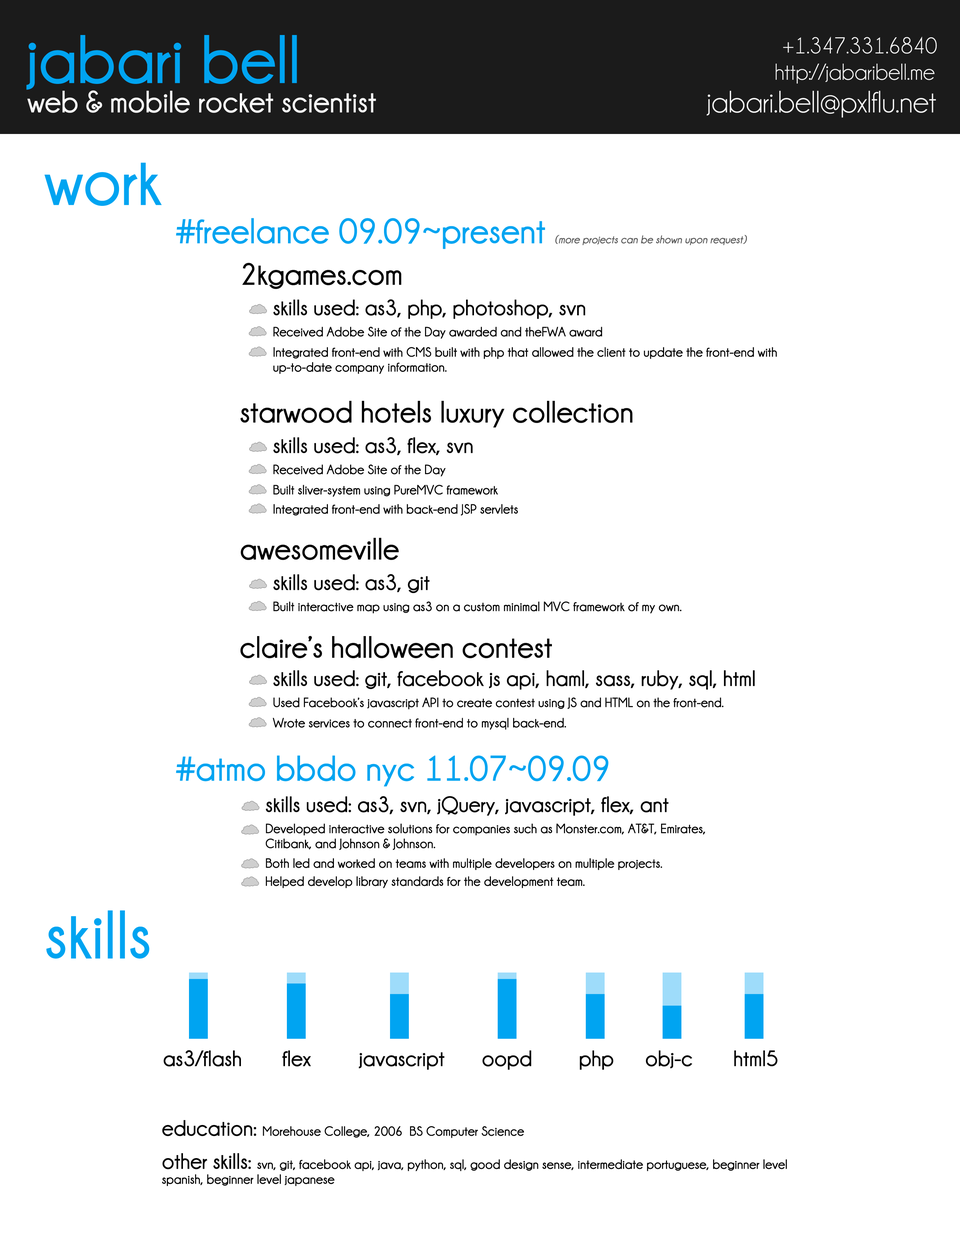
<style>
.page{position:relative;width:960px;height:1242px;background:#ffffff}
.page>*{position:absolute;margin:0}
.t1{font:69.2px "Champagne&Limousines-Bold";color:#00a4f1}
.t2{font:23.3px "Champagne&Limousines";color:#f7f7f7}
.t3{font:31.2px "Champagne&Limousines-Bold";color:#f7f7f7}
.t4{font:31.2px "Champagne&Limousines";color:#f7f7f7}
.t5{font:11.3px "Champagne&Limousines-BoldItalic";color:#595959}
.t6{font:36.2px "Champagne&Limousines-Bold";color:#00a4f1}
.t7{font:31.2px "Champagne&Limousines-Bold";color:#010101}
.t8{font:22.6px "Champagne&Limousines-Bold";color:#010101}
.t9{font:13.6px "Champagne&Limousines-Bold";color:#010101}
.t10{font:13.6px/15px "Champagne&Limousines-Bold";color:#010101}
.t11{font:22.6px/15px "Champagne&Limousines-Bold";color:#010101}
</style>
<div class="page">
<p class="t1" style="left:26px;top:35px;width:271px;height:55px">jabari bell</p>
<p class="t2" style="left:783px;top:37px;width:154px;height:17px">+1.347.331.6840</p>
<p class="t2" style="left:775px;top:64px;width:160px;height:20px">http://jabaribell.me</p>
<p class="t3" style="left:27px;top:90px;width:349px;height:23px">web &amp; mobile rocket scientist</p>
<p class="t4" style="left:707px;top:91px;width:229px;height:27px">jabari.bell@pxlflu.net</p>
<p class="t1" style="left:44px;top:163px;width:118px;height:43px">work</p>
<p class="t5" style="left:176px;top:218px;width:571px;height:31px"><span class="t6">#freelance 09.09~present </span>(more projects can be shown upon request)</p>
<p class="t7" style="left:242px;top:263px;width:159px;height:26px">2kgames.com</p>
<p class="t8" style="left:273px;top:299px;width:312px;height:20px">skills used: as3, php, photoshop, svn</p>
<p class="t9" style="left:273px;top:327px;width:329px;height:12px">Received Adobe Site of the Day awarded and theFWA award</p>
<p class="t10" style="left:273px;top:347px;width:504px;height:27px">Integrated front-end with CMS built with php that allowed the client to update the front-end with <br>up-to-date company information.</p>
<p class="t7" style="left:240px;top:401px;width:392px;height:27px">starwood hotels luxury collection</p>
<p class="t8" style="left:273px;top:437px;width:200px;height:18px">skills used: as3, flex, svn</p>
<p class="t9" style="left:273px;top:465px;width:173px;height:12px">Received Adobe Site of the Day</p>
<p class="t9" style="left:273px;top:485px;width:225px;height:12px">Built sliver-system using PureMVC framework</p>
<p class="t9" style="left:273px;top:504px;width:245px;height:12px">Integrated front-end with back-end JSP servlets</p>
<p class="t7" style="left:241px;top:538px;width:158px;height:22px">awesomeville</p>
<p class="t8" style="left:273px;top:574px;width:157px;height:19px">skills used: as3, git</p>
<p class="t9" style="left:273px;top:602px;width:408px;height:12px">Built interactive map using as3 on a custom minimal MVC framework of my own.</p>
<p class="t7" style="left:240px;top:636px;width:312px;height:22px">claire’s halloween contest</p>
<p class="t8" style="left:273px;top:670px;width:482px;height:20px">skills used: git, facebook js api, haml, sass, ruby, sql, html</p>
<p class="t9" style="left:273px;top:698px;width:451px;height:12px">Used Facebook’s javascript API to create contest using JS and HTML on the front-end.</p>
<p class="t9" style="left:273px;top:718px;width:293px;height:12px">Wrote services to connect front-end to mysql back-end.</p>
<p class="t6" style="left:176px;top:756px;width:432px;height:31px">#atmo bbdo nyc 11.07~09.09</p>
<p class="t8" style="left:266px;top:796px;width:403px;height:20px">skills used: as3, svn, jQuery, javascript, flex, ant</p>
<p class="t10" style="left:266px;top:824px;width:439px;height:26px">Developed interactive solutions for companies such as Monster.com, AT&amp;T, Emirates, <br>Citibank, and Johnson &amp; Johnson.</p>
<p class="t9" style="left:266px;top:858px;width:396px;height:12px">Both led and worked on teams with multiple developers on multiple projects.</p>
<p class="t9" style="left:266px;top:876px;width:319px;height:12px">Helped develop library standards for the development team.</p>
<p class="t1" style="left:46px;top:911px;width:103px;height:48px">skills</p>
<p class="t8" style="left:163px;top:1050px;width:78px;height:17px">as3/flash</p>
<p class="t8" style="left:282px;top:1051px;width:29px;height:16px">flex</p>
<p class="t8" style="left:359px;top:1053px;width:86px;height:17px">javascript</p>
<p class="t8" style="left:482px;top:1051px;width:49px;height:19px">oopd</p>
<p class="t8" style="left:580px;top:1051px;width:33px;height:19px">php</p>
<p class="t8" style="left:646px;top:1051px;width:46px;height:18px">obj-c</p>
<p class="t8" style="left:734px;top:1051px;width:43px;height:15px">html5</p>
<p class="t9" style="left:162px;top:1120px;width:362px;height:18px"><span class="t8">education: </span>Morehouse College, 2006  BS Computer Science</p>
<p class="t10" style="left:162px;top:1153px;width:625px;height:34px"><span class="t11">other skills: </span>svn, git, facebook api, java, python, sql, good design sense, intermediate portuguese, beginner level <br>spanish, beginner level japanese</p>
</div>
